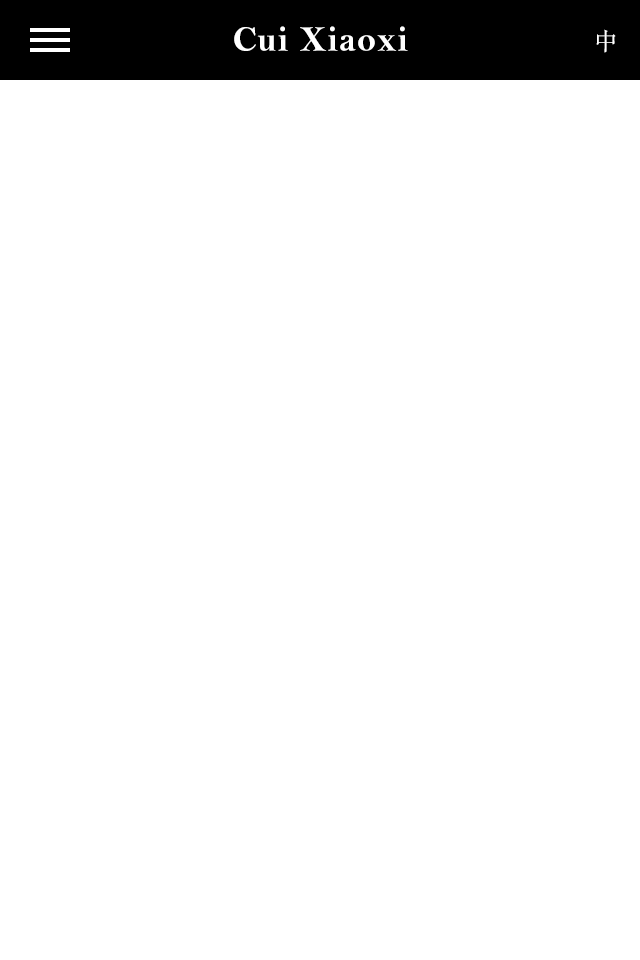
<style>
.page{position:relative;width:640px;height:960px;background:#ffffff}
.page>*{position:absolute;margin:0}
.t1{font:36px "BellMTBold";letter-spacing:0.02em;color:#ffffff}
.t2{font:36px "BellMTBold";letter-spacing:0.02em;color:#ffffff;text-transform:uppercase}
.t3{font:24px "STSongti-SC-Regular";letter-spacing:0.02em;color:#ffffff;text-transform:uppercase}
</style>
<div class="page">
<p class="t1" style="left:234px;top:26px;width:174px;height:25px"><span class="t2">c</span>ui <span class="t2">x</span>iaoxi</p>
<p class="t3" style="left:596px;top:29px;width:20px;height:24px">中</p>
</div>
